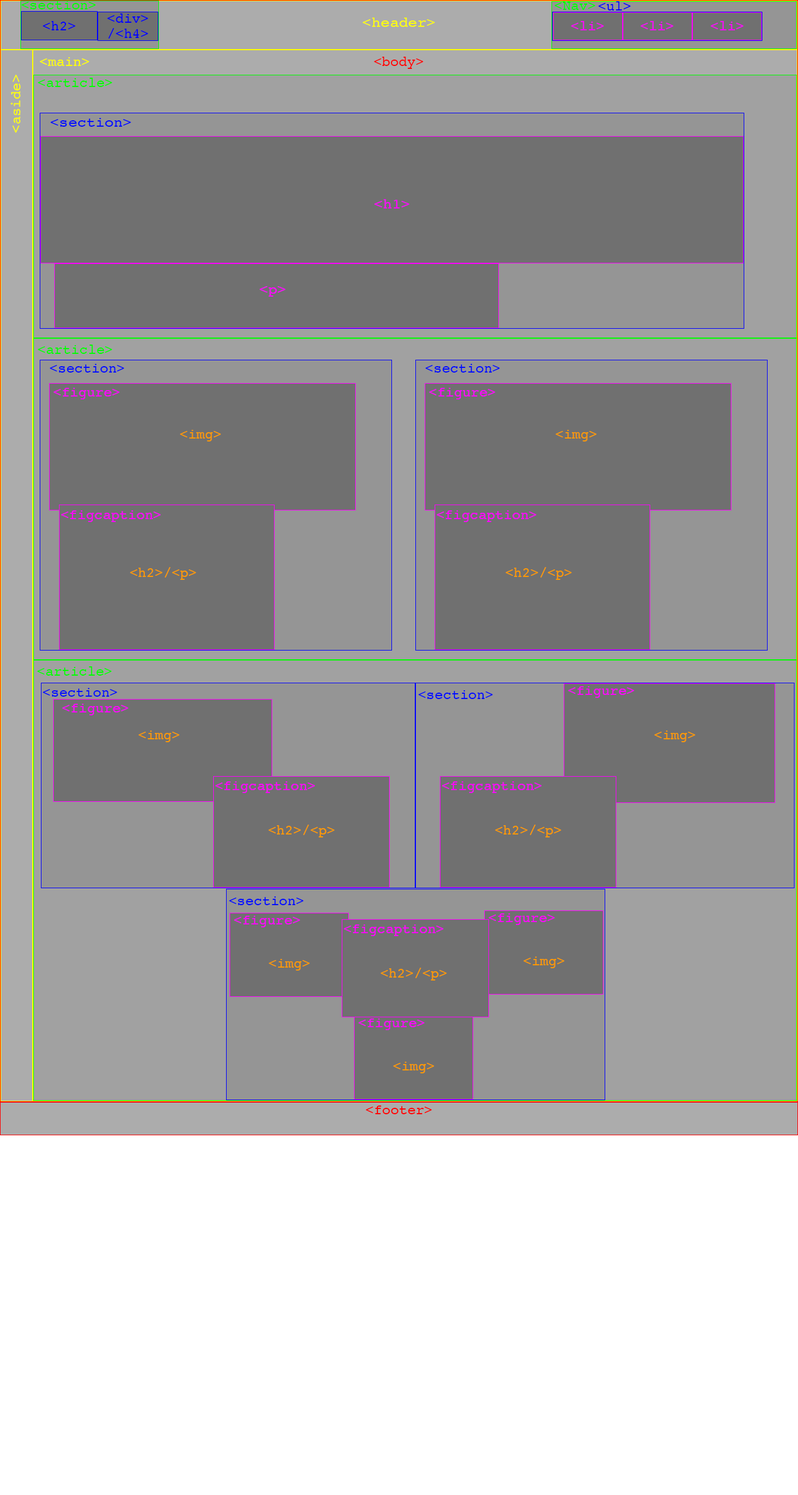
<style>
.page{position:relative;width:798px;height:1495px;background:#707070}
.page>*{position:absolute;margin:0}
.t1{font:14px "Courier";color:#00ff00}
.t2{font:14px "Courier";color:#0000ff}
.t3{font:14px/15.2px "Courier";color:#0000ff}
.t4{font:14px "Courier";color:#fdfd0b;scale:1.09 1}
.t5{font:14px "Courier";color:#ff00ff}
.t6{font:14px "Courier";color:#ffff00}
.t7{font:14px "Courier";color:#fd0606}
.t8{font:14px "Courier";color:#000cff;scale:1.08 1}
.t9{font:14px "Courier";color:#ff00ff;scale:1.08 1}
.t10{font:14px "Courier";color:#000cff}
.t11{font:14px "Courier";color:#ff9900}
.t12{font:14px "Courier";color:#ff0000}
</style>
<div class="page">
<p class="t1" style="left:21px;top:1px;width:75px;height:8px">&lt;section&gt;</p>
<p class="t1" style="left:554px;top:2px;width:41px;height:8px">&lt;Nav&gt;</p>
<p class="t2" style="left:598px;top:1px;width:33px;height:10px">&lt;ul&gt;</p>
<p class="t3" style="left:107px;top:13px;width:41px;height:26px;text-align:center">&lt;div&gt;<br>/&lt;h4&gt;</p>
<p class="t4" style="left:362px;top:18px;width:73px;height:9px">&lt;header&gt;</p>
<p class="t2" style="left:43px;top:21px;width:32px;height:9px">&lt;h2&gt;</p>
<p class="t5" style="left:571px;top:21px;width:33px;height:9px">&lt;li&gt;</p>
<p class="t5" style="left:640px;top:21px;width:33px;height:9px">&lt;li&gt;</p>
<p class="t5" style="left:710px;top:21px;width:33px;height:9px">&lt;li&gt;</p>
<p class="t6" style="left:40px;top:57px;width:49px;height:9px">&lt;main&gt;</p>
<p class="t7" style="left:374px;top:57px;width:49px;height:12px">&lt;body&gt;</p>
<p class="t6" style="left:11px;top:75px;width:10px;height:58px;rotate:-90deg">&lt;aside&gt;</p>
<p class="t1" style="left:37px;top:78px;width:75px;height:9px">&lt;article&gt;</p>
<p class="t8" style="left:50px;top:118px;width:81px;height:9px">&lt;section&gt;</p>
<p class="t9" style="left:374px;top:199px;width:35px;height:9px">&lt;h1&gt;</p>
<p class="t9" style="left:259px;top:286px;width:27px;height:11px">&lt;p&gt;</p>
<p class="t1" style="left:37px;top:345px;width:75px;height:9px">&lt;article&gt;</p>
<p class="t10" style="left:50px;top:364px;width:74px;height:9px">&lt;section&gt;</p>
<p class="t10" style="left:425px;top:364px;width:75px;height:9px">&lt;section&gt;</p>
<p class="t5" style="left:53px;top:388px;width:67px;height:11px">&lt;figure&gt;</p>
<p class="t5" style="left:429px;top:388px;width:66px;height:11px">&lt;figure&gt;</p>
<p class="t11" style="left:180px;top:430px;width:41px;height:11px">&lt;img&gt;</p>
<p class="t11" style="left:555px;top:430px;width:41px;height:11px">&lt;img&gt;</p>
<p class="t5" style="left:61px;top:510px;width:100px;height:12px">&lt;figcaption&gt;</p>
<p class="t5" style="left:436px;top:510px;width:100px;height:12px">&lt;figcaption&gt;</p>
<p class="t11" style="left:130px;top:567px;width:66px;height:13px">&lt;h2&gt;/&lt;p&gt;</p>
<p class="t11" style="left:505px;top:567px;width:67px;height:13px">&lt;h2&gt;/&lt;p&gt;</p>
<p class="t1" style="left:37px;top:666px;width:75px;height:10px">&lt;article&gt;</p>
<p class="t10" style="left:43px;top:688px;width:74px;height:9px">&lt;section&gt;</p>
<p class="t5" style="left:568px;top:686px;width:66px;height:12px">&lt;figure&gt;</p>
<p class="t10" style="left:418px;top:690px;width:75px;height:9px">&lt;section&gt;</p>
<p class="t5" style="left:62px;top:704px;width:66px;height:11px">&lt;figure&gt;</p>
<p class="t11" style="left:138px;top:731px;width:41px;height:11px">&lt;img&gt;</p>
<p class="t11" style="left:654px;top:731px;width:41px;height:11px">&lt;img&gt;</p>
<p class="t5" style="left:215px;top:781px;width:100px;height:12px">&lt;figcaption&gt;</p>
<p class="t5" style="left:441px;top:781px;width:100px;height:12px">&lt;figcaption&gt;</p>
<p class="t11" style="left:268px;top:825px;width:67px;height:12px">&lt;h2&gt;/&lt;p&gt;</p>
<p class="t11" style="left:495px;top:825px;width:66px;height:12px">&lt;h2&gt;/&lt;p&gt;</p>
<p class="t10" style="left:229px;top:896px;width:75px;height:9px">&lt;section&gt;</p>
<p class="t5" style="left:234px;top:916px;width:66px;height:11px">&lt;figure&gt;</p>
<p class="t5" style="left:488px;top:913px;width:67px;height:12px">&lt;figure&gt;</p>
<p class="t5" style="left:343px;top:924px;width:100px;height:12px">&lt;figcaption&gt;</p>
<p class="t11" style="left:269px;top:959px;width:40px;height:12px">&lt;img&gt;</p>
<p class="t11" style="left:523px;top:957px;width:41px;height:11px">&lt;img&gt;</p>
<p class="t11" style="left:380px;top:968px;width:67px;height:12px">&lt;h2&gt;/&lt;p&gt;</p>
<p class="t5" style="left:358px;top:1018px;width:67px;height:12px">&lt;figure&gt;</p>
<p class="t11" style="left:393px;top:1062px;width:41px;height:11px">&lt;img&gt;</p>
<p class="t12" style="left:366px;top:1105px;width:66px;height:9px">&lt;footer&gt;</p>
</div>
